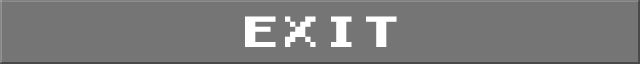
<style>
.page{position:relative;width:640px;height:64px;background:#757575}
.page>*{position:absolute;margin:0}
.t1{font:40.5px "GamegirlClassic";color:#ffffff}
</style>
<div class="page">
<p class="t1" style="left:245px;top:16px;width:152px;height:31px">exit</p>
</div>
